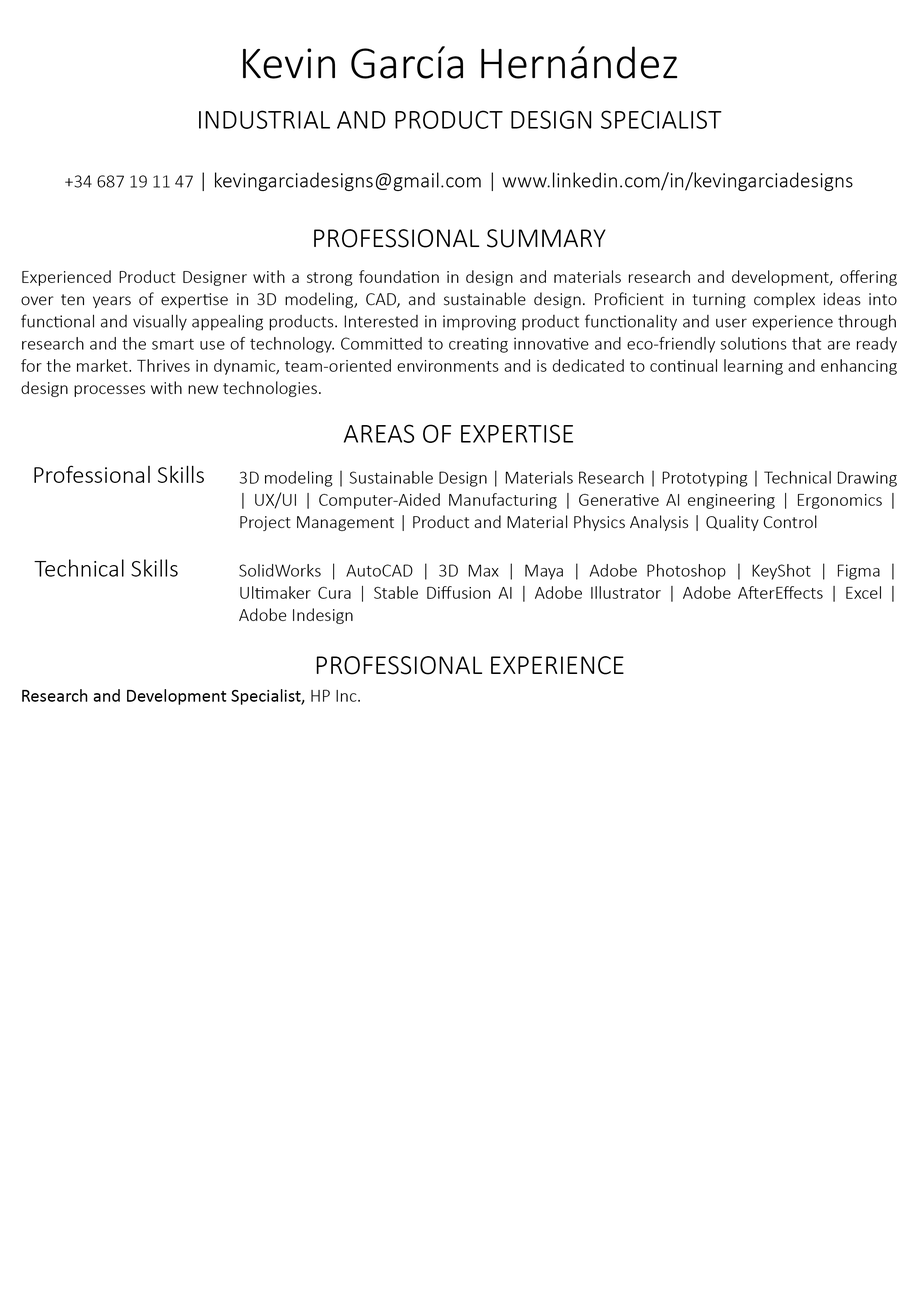
<style>
.page{position:relative;width:918px;height:1299px;background:#ffffff}
.page>*{position:absolute;margin:0}
.t1{font:46.3px "Calibri-Light";color:#000000}
.t2{font:27.8px "Calibri-Light";color:#000000}
.t3{font:21.6px "Calibri-Light";color:#000000}
.t4{font:18.5px "Calibri-Light";color:#000000}
.t5{font:24.7px "Calibri-Light";color:#000000}
.t6{font:18.5px "Calibri";color:#000000}
</style>
<div class="page">
<p class="t1" style="left:243px;top:46px;width:435px;height:32px">Kevin García Hernández</p>
<p class="t2" style="left:199px;top:111px;width:523px;height:18px">INDUSTRIAL AND PRODUCT DESIGN SPECIALIST</p>
<p class="t3" style="left:65px;top:172px;width:788px;height:19px"><span class="t4">+34 687 19 11 47</span> | kevingarciadesigns@gmail.com | www.linkedin.com/in/kevingarciadesigns</p>
<p class="t2" style="left:314px;top:229px;width:292px;height:18px">PROFESSIONAL SUMMARY</p>
<p class="t4" style="left:21px;top:270px;width:876px;height:127px;text-align:justify">Experienced Product Designer with a strong foundation in design and materials research and development, offering over ten years of expertise in 3D modeling, CAD, and sustainable design. Proficient in turning complex ideas into functional and visually appealing products. Interested in improving product functionality and user experience through research and the smart use of technology. Committed to creating innovative and eco-friendly solutions that are ready for the market. Thrives in dynamic, team-oriented environments and is dedicated to continual learning and enhancing design processes with new technologies.</p>
<p class="t2" style="left:344px;top:425px;width:229px;height:18px">AREAS OF EXPERTISE</p>
<p class="t5" style="left:34px;top:466px;width:170px;height:17px">Professional Skills</p>
<p class="t4" style="left:240px;top:471px;width:657px;height:60px;text-align:justify">3D modeling | Sustainable Design | Materials Research | Prototyping | Technical Drawing | UX/UI | Computer-Aided Manufacturing | Generative AI engineering | Ergonomics | Project Management | Product and Material Physics Analysis | Quality Control</p>
<p class="t5" style="left:34px;top:559px;width:144px;height:17px">Technical Skills</p>
<p class="t4" style="left:239px;top:563px;width:655px;height:61px;text-align:justify">SolidWorks | AutoCAD | 3D Max | Maya | Adobe Photoshop | KeyShot | Figma | Ultimaker Cura | Stable Diffusion AI | Adobe Illustrator | Adobe AfterEffects | Excel | Adobe Indesign</p>
<p class="t2" style="left:317px;top:656px;width:307px;height:18px">PROFESSIONAL EXPERIENCE</p>
<p class="t6" style="left:22px;top:689px;width:338px;height:16px">Research and Development Specialist, <span class="t4">HP Inc.</span></p>
</div>
